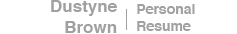
<style>
.page{position:relative;width:237px;height:34px;background:#ffffff}
.page>*{position:absolute;margin:0}
.t1{font:17px "Helvetica-Bold";color:#a19f9f}
.t2{font:14px "Helvetica-Bold";color:#a19f9f}
</style>
<div class="page">
<p class="t1" style="left:51px;top:0px;width:66px;height:33px;text-align:right">Dustyne<br>Brown</p>
<p class="t2" style="left:137px;top:4px;width:58px;height:27px">Personal Resume</p>
</div>
